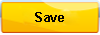
<style>
.page{position:relative;width:100px;height:35px}
.page>*{position:absolute;margin:0}
.t1{font:13px "Arial-BoldMT";color:#030102}
</style>
<div class="page">
<p class="t1" style="left:35px;top:12px;width:29px;height:10px">Save</p>
</div>
